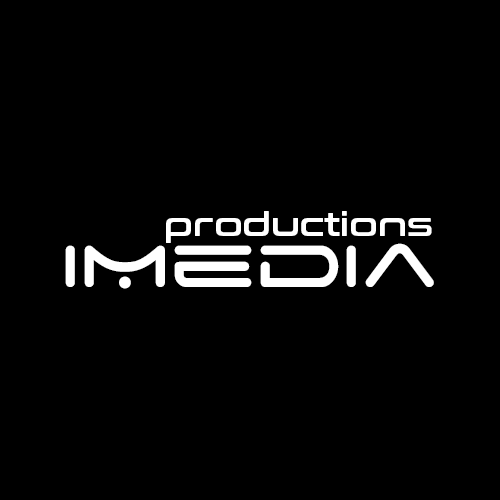
<style>
.page{position:relative;width:500px;height:500px;background:#000000}
.page>*{position:absolute;margin:0}
.t1{font:33.1px "ConthraxSb-Regular";color:#ffffff}
.t2{font:95px "SpaceAge";color:#ffffff}
</style>
<div class="page">
<p class="t1" style="left:166px;top:211px;width:266px;height:32px">productions</p>
<p class="t2" style="left:65px;top:243px;width:369px;height:46px">iMedia</p>
</div>
